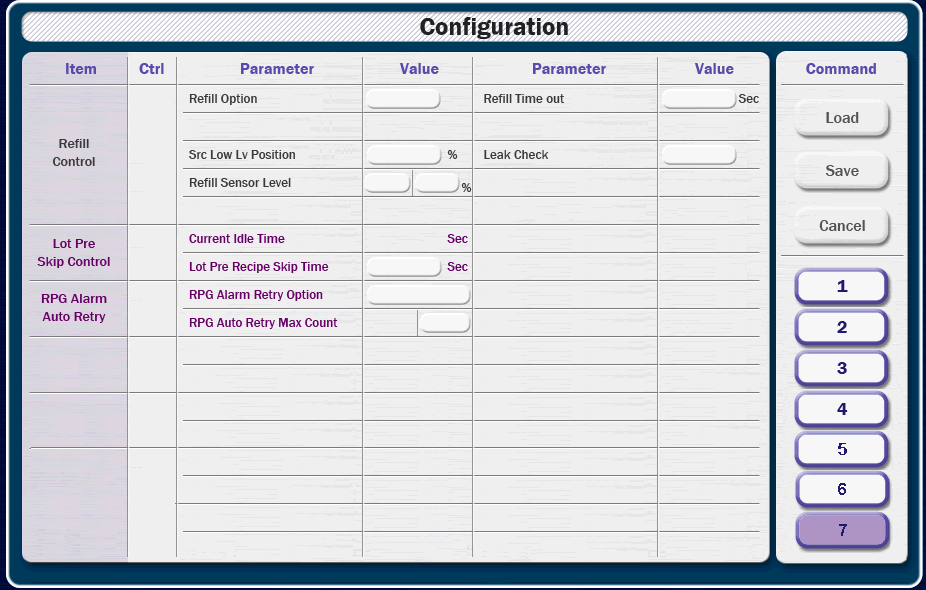
<style>
.page{position:relative;width:926px;height:590px;background:#efefef}
.page>*{position:absolute;margin:0}
.t1{font:13px/28px "FranklinGothic-Medium";color:#3a3a3a}
.t2{font:13px/28px "FranklinGothic-Medium";color:#660066}
.t3{font:14px/18px "FranklinGothic-Medium";color:#3a3a3a}
.t4{font:14px/18px "FranklinGothic-Medium";color:#660066}
</style>
<div class="page">
<p class="t1" style="left:189px;top:94px;width:570px;height:235px">Refill Option         Refill Time out        Sec<br><br>Src Low Lv Position       %   Leak Check<br>Refill Sensor Level<br><br><span class="t2">Current Idle Time       Sec<br>Lot Pre Recipe Skip Time      Sec<br>RPG Alarm Retry Option<br>RPG Auto Retry Max Count</span></p>
<p class="t3" style="left:52px;top:139px;width:43px;height:27px;text-align:center">Refill<br>Control</p>
<p class="t4" style="left:37px;top:239px;width:73px;height:29px;text-align:center">Lot Pre<br>Skip Control</p>
<p class="t4" style="left:41px;top:294px;width:66px;height:29px;text-align:center">RPG Alarm<br>Auto Retry</p>
</div>
